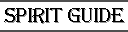
<style>
.page{position:relative;width:128px;height:32px;background:#ffffff}
.page>*{position:absolute;margin:0}
.t1{font:21px "AlgerianBasD";letter-spacing:-0.025em;color:#000000}
.t2{font:21px "AlgerianBasD";letter-spacing:-0.025em}
</style>
<div class="page">
<p class="t1" style="left:4px;top:8px;width:120px;height:15px">SPIRIT GUIDE</p>
<p class="t2" style="left:5px;top:9px;width:120px;height:15px">SPIRIT GUIDE</p>
</div>
